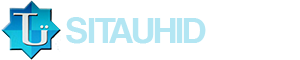
<style>
.page{position:relative;width:300px;height:60px;background:#ffffff}
.page>*{position:absolute;margin:0}
.t1{font:38.5px "CoolveticaRg-Regular";color:#b3e6f3}
</style>
<div class="page">
<p class="t1" style="left:66px;top:17px;width:140px;height:27px">SITAUHID</p>
</div>
